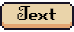
<style>
.page{position:relative;width:74px;height:32px;background:#ead4aa}
.page>*{position:absolute;margin:0}
.t1{font:24px "DungeonFont";color:#000000}
</style>
<div class="page">
<p class="t1" style="left:17px;top:6px;width:39px;height:14px">Text</p>
</div>
